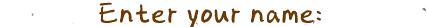
<style>
.page{position:relative;width:427px;height:27px;background:#ffffff}
.page>*{position:absolute;margin:0}
.t1{font:27.8px "AaJoe";color:#6a3906}
</style>
<div class="page">
<p class="t1" style="left:99px;top:2px;width:222px;height:27px">Enter your name:</p>
</div>
